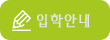
<style>
.page{position:relative;width:110px;height:40px;background:#a5c71f}
.page>*{position:absolute;margin:0}
.t1{font:15px "HYcysM";letter-spacing:-0.025em;color:#e7e5e6;scale:0.95 1}
</style>
<div class="page">
<p class="t1" style="left:37px;top:13px;width:53px;height:15px">입학안내</p>
</div>
